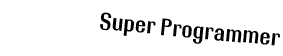
<style>
.page{position:relative;width:283px;height:56px;background:#ffffff}
.page>*{position:absolute;margin:0}
.t1{font:24px "RolloutPlain";color:#000000}
</style>
<div class="page">
<p class="t1" style="left:100px;top:12px;width:180px;height:34px;rotate:6deg">Super Programmer</p>
</div>
